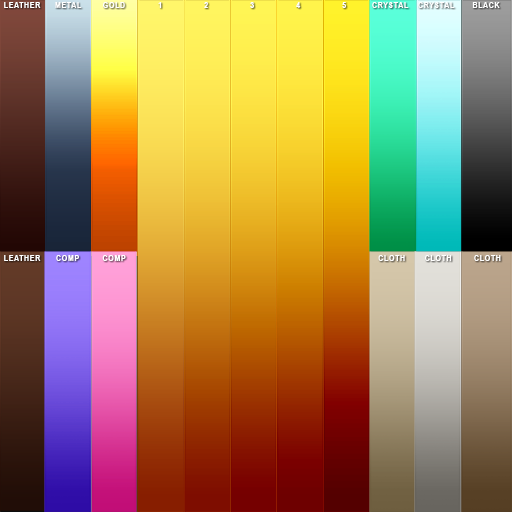
<style>
.page{position:relative;width:512px;height:512px}
.page>*{position:absolute;margin:0}
.t1{font:7.5px "Arial-BoldMT";letter-spacing:0.05em;color:#ffffff}
</style>
<div class="page">
<p class="t1" style="left:4px;top:2px;width:37px;height:6px">LEATHER</p>
<p class="t1" style="left:55px;top:2px;width:27px;height:6px">METAL</p>
<p class="t1" style="left:103px;top:2px;width:22px;height:6px">GOLD</p>
<p class="t1" style="left:158px;top:2px;width:4px;height:6px">1</p>
<p class="t1" style="left:204px;top:2px;width:4px;height:6px">2</p>
<p class="t1" style="left:250px;top:2px;width:4px;height:6px">3</p>
<p class="t1" style="left:296px;top:2px;width:5px;height:6px">4</p>
<p class="t1" style="left:342px;top:2px;width:4px;height:6px">5</p>
<p class="t1" style="left:372px;top:2px;width:37px;height:6px">CRYSTAL</p>
<p class="t1" style="left:418px;top:2px;width:37px;height:6px">CRYSTAL</p>
<p class="t1" style="left:472px;top:2px;width:28px;height:6px">BLACK</p>
<p class="t1" style="left:4px;top:255px;width:37px;height:6px">LEATHER</p>
<p class="t1" style="left:56px;top:255px;width:23px;height:6px">COMP</p>
<p class="t1" style="left:102px;top:255px;width:24px;height:6px">COMP</p>
<p class="t1" style="left:378px;top:255px;width:27px;height:6px">CLOTH</p>
<p class="t1" style="left:425px;top:255px;width:27px;height:6px">CLOTH</p>
<p class="t1" style="left:474px;top:255px;width:27px;height:6px">CLOTH</p>
</div>
